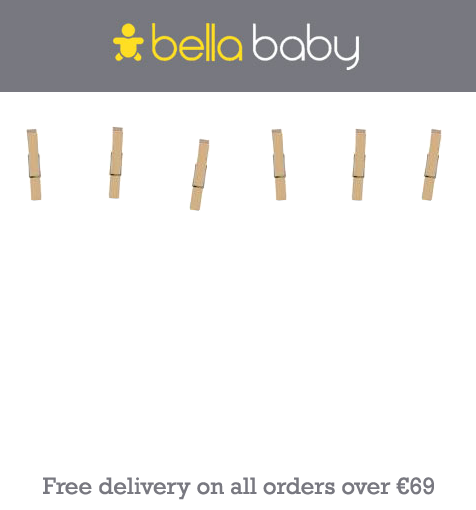
<style>
.page{position:relative;width:476px;height:510px;background:#ffffff}
.page>*{position:absolute;margin:0}
.t1{font:24px "Rockwell";color:#787880}
</style>
<div class="page">
<p class="t1" style="left:43px;top:477px;width:391px;height:23px">Free delivery on all orders over €69</p>
</div>
